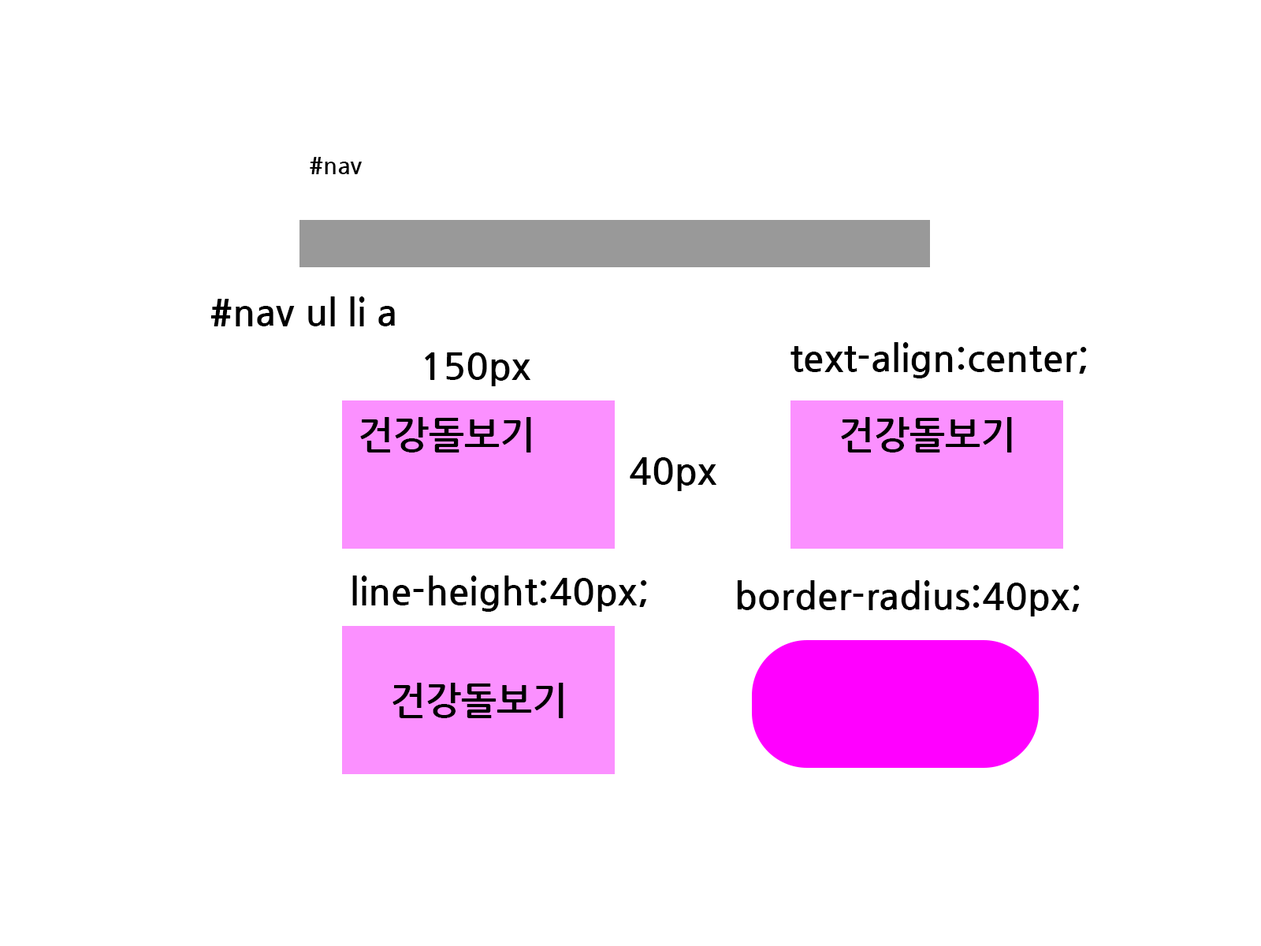
<style>
.page{position:relative;width:1261px;height:946px;background:#ffffff}
.page>*{position:absolute;margin:0}
.t1{font:23.6px "NanumGothicBold";color:#000000}
.t2{font:37.8px "NanumGothicBold";color:#000000}
</style>
<div class="page">
<p class="t1" style="left:310px;top:157px;width:52px;height:17px">#nav</p>
<p class="t2" style="left:210px;top:296px;width:185px;height:30px">#nav ul li a</p>
<p class="t2" style="left:425px;top:352px;width:106px;height:34px">150px</p>
<p class="t2" style="left:790px;top:342px;width:297px;height:36px">text-align:center;</p>
<p class="t2" style="left:360px;top:417px;width:171px;height:35px">건강돌보기</p>
<p class="t2" style="left:841px;top:417px;width:171px;height:35px">건강돌보기</p>
<p class="t2" style="left:630px;top:457px;width:87px;height:34px">40px</p>
<p class="t2" style="left:352px;top:575px;width:295px;height:37px">line-height:40px;</p>
<p class="t2" style="left:737px;top:580px;width:343px;height:36px">border-radius:40px;</p>
<p class="t2" style="left:392px;top:682px;width:171px;height:36px">건강돌보기</p>
</div>
